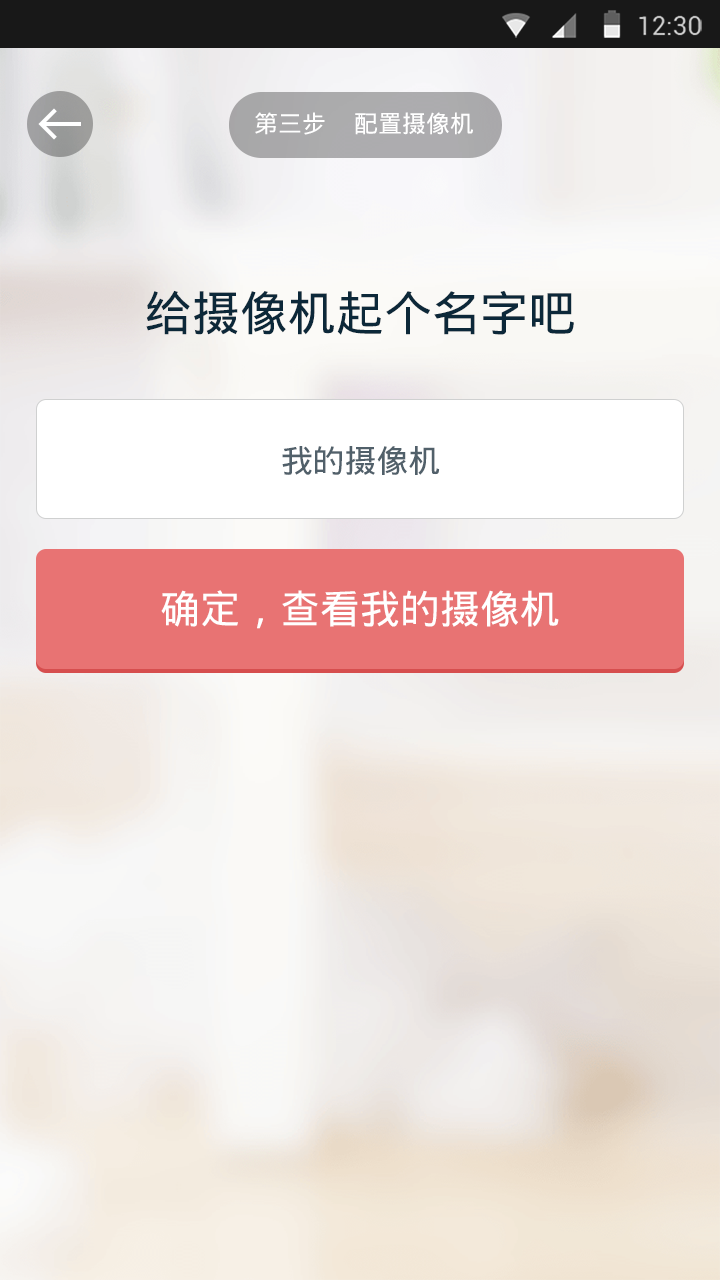
<style>
.page{position:relative;width:720px;height:1280px}
.page>*{position:absolute;margin:0}
.t1{font:24px "DroidSansFallback";color:#ffffff}
.t2{font:48px "DroidSansFallback";color:#0c2839}
.t3{font:32px "DroidSansFallback";color:#51606a}
.t4{font:40px "DroidSansFallback";color:#ffffff}
</style>
<div class="page">
<p class="t1" style="left:255px;top:112px;width:70px;height:23px">第三步</p>
<p class="t1" style="left:355px;top:112px;width:118px;height:23px">配置摄像机</p>
<p class="t2" style="left:146px;top:290px;width:428px;height:45px">给摄像机起个名字吧</p>
<p class="t3" style="left:282px;top:446px;width:158px;height:29px">我的摄像机</p>
<p class="t4" style="left:161px;top:590px;width:398px;height:39px">确定，查看我的摄像机</p>
</div>
